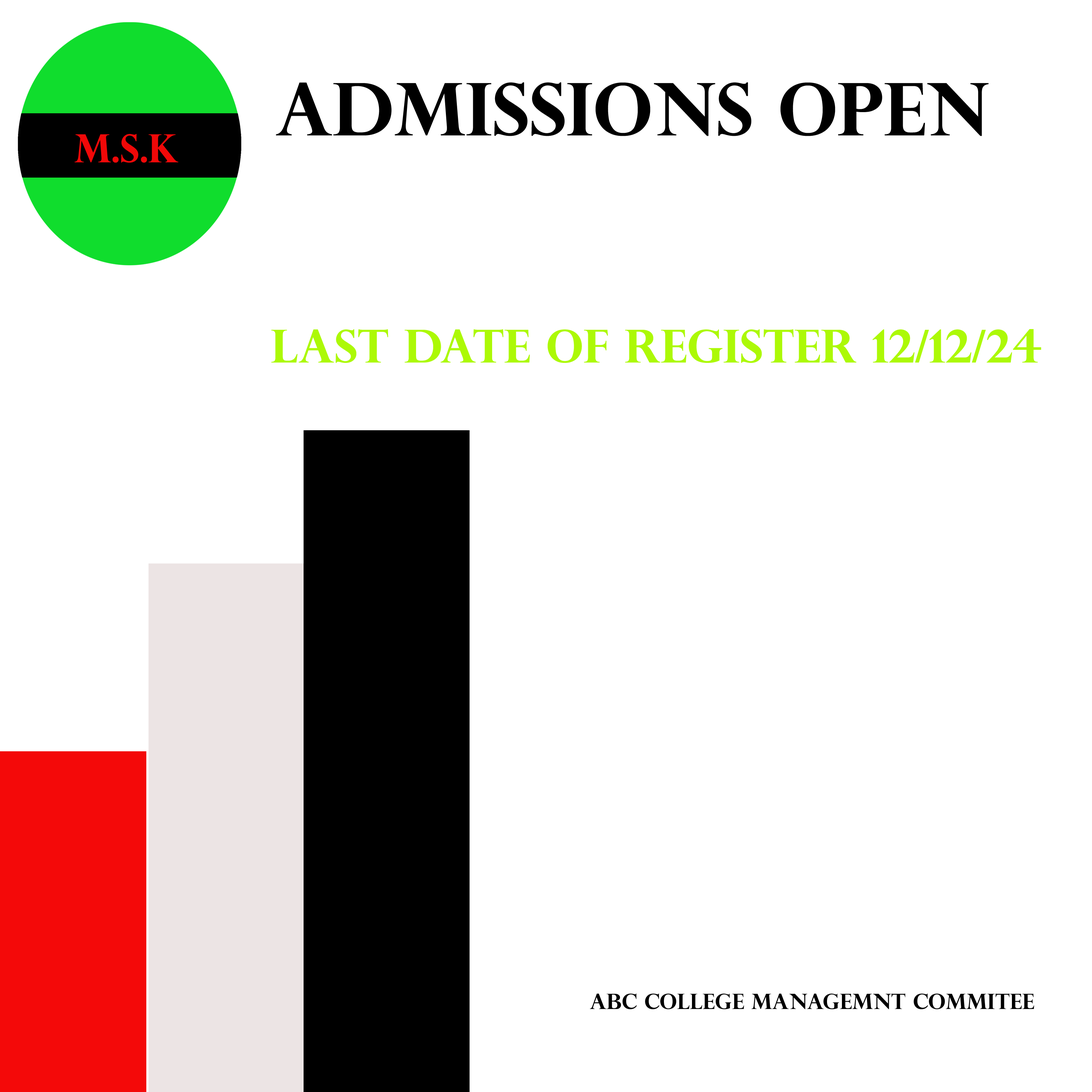
<style>
.page{position:relative;width:1092px;height:1092px;background:#ffffff}
.page>*{position:absolute;margin:0}
.t1{font:72.8px "PerpetuaTitlingMT-Bold";color:#000000}
.t2{font:39px "PerpetuaTitlingMT-Bold";color:#f10808;scale:0.96 1}
.t3{font:45.5px "PerpetuaTitlingMT-Bold";color:#acf906}
.t4{font:21.2px "PerpetuaTitlingMT-Bold";color:#000000}
</style>
<div class="page">
<p class="t1" style="left:276px;top:82px;width:713px;height:54px">admissions open</p>
<p class="t2" style="left:74px;top:134px;width:104px;height:29px">M.S.K</p>
<p class="t3" style="left:271px;top:329px;width:770px;height:34px">last date of Register 12/12/24</p>
<p class="t4" style="left:590px;top:993px;width:444px;height:16px">ABC college Managemnt commitee</p>
</div>
